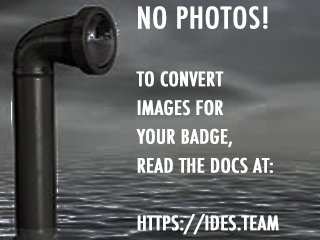
<style>
.page{position:relative;width:320px;height:240px}
.page>*{position:absolute;margin:0}
.t1{font:19.2px "Futura-CondensedMedium";color:#ffffff;font-weight:bold;scale:1.1 1}
.t2{font:28.8px "Futura-CondensedMedium";color:#ffffff;font-weight:bold;scale:1.1 1}
</style>
<div class="page">
<p class="t1" style="left:136px;top:6px;width:143px;height:229px"><span class="t2">NO PHOTOS!<br></span><br>TO CONVERT<br>IMAGES FOR<br>YOUR BADGE,<br>READ THE DOCS AT:<br> <br>HTTPS://IDES.TEAM</p>
</div>
